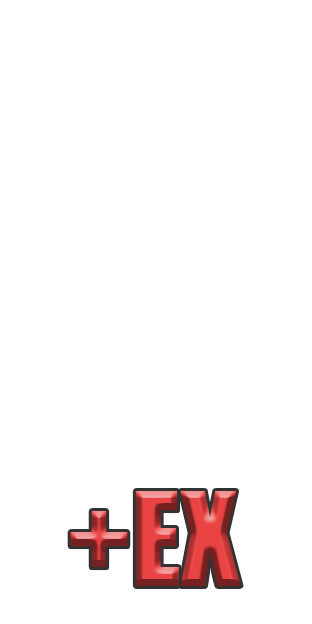
<style>
.page{position:relative;width:312px;height:624px;background:#ffffff}
.page>*{position:absolute;margin:0}
.t1{font:120px "Impact"}
</style>
<div class="page">
<p class="t1" style="left:70px;top:491px;width:171px;height:95px">+EX</p>
</div>
